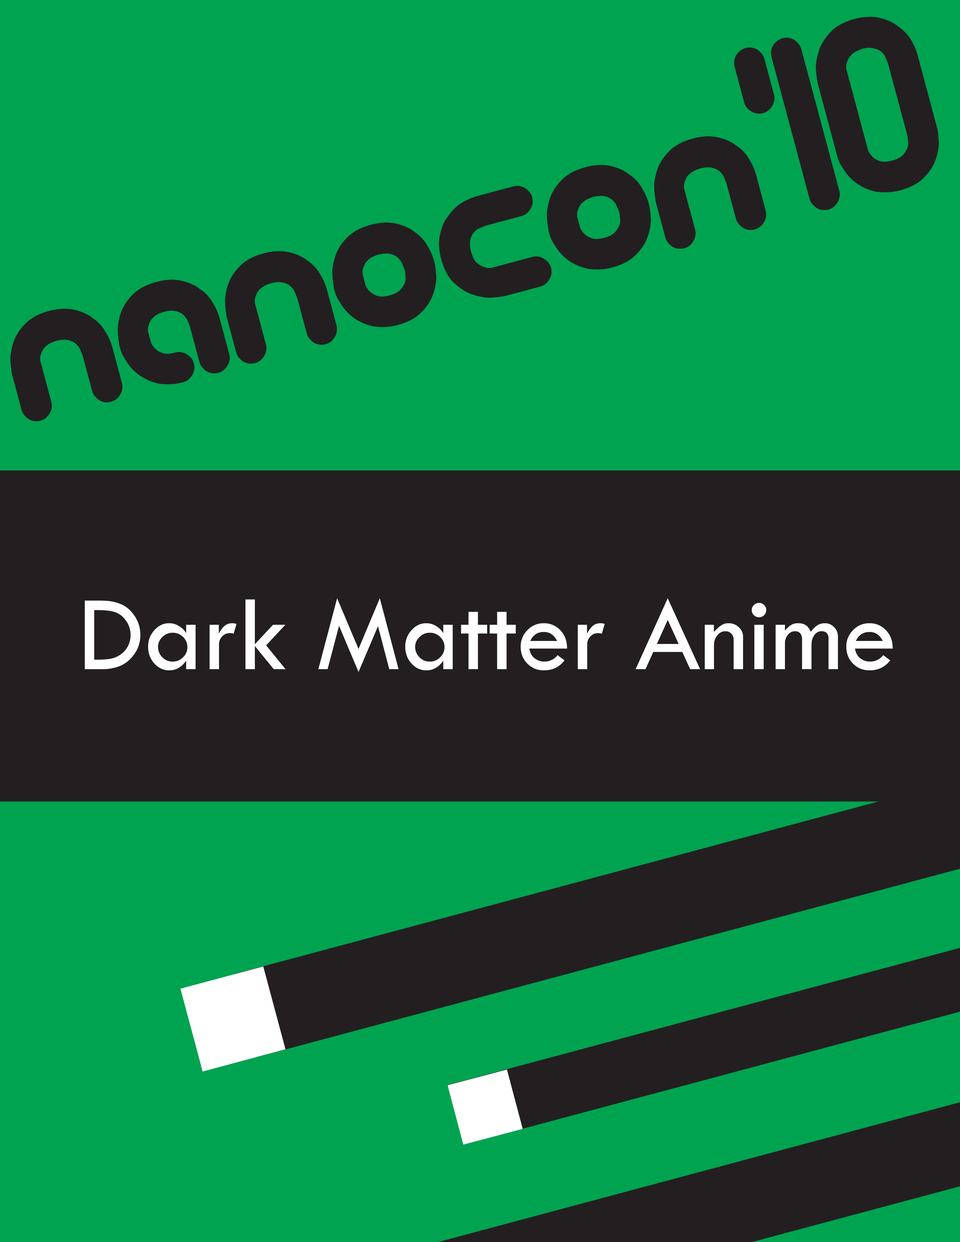
<style>
.page{position:relative;width:960px;height:1242px;background:#00a350}
.page>*{position:absolute;margin:0}
.t1{font:248.5px "technooverloadBRK";letter-spacing:-0.01em;color:#231f20}
.t2{font:109.8px "TwCenMT-Regular";letter-spacing:-0.01em;color:#ffffff}
</style>
<div class="page">
<p class="t1" style="left:10px;top:17px;width:929px;height:404px;rotate:-15deg">nanocon'10</p>
<p class="t1" style="left:10px;top:17px;width:929px;height:404px;rotate:-15deg">nanocon'10</p>
<p class="t2" style="left:85px;top:598px;width:808px;height:74px">Dark Matter Anime</p>
</div>
